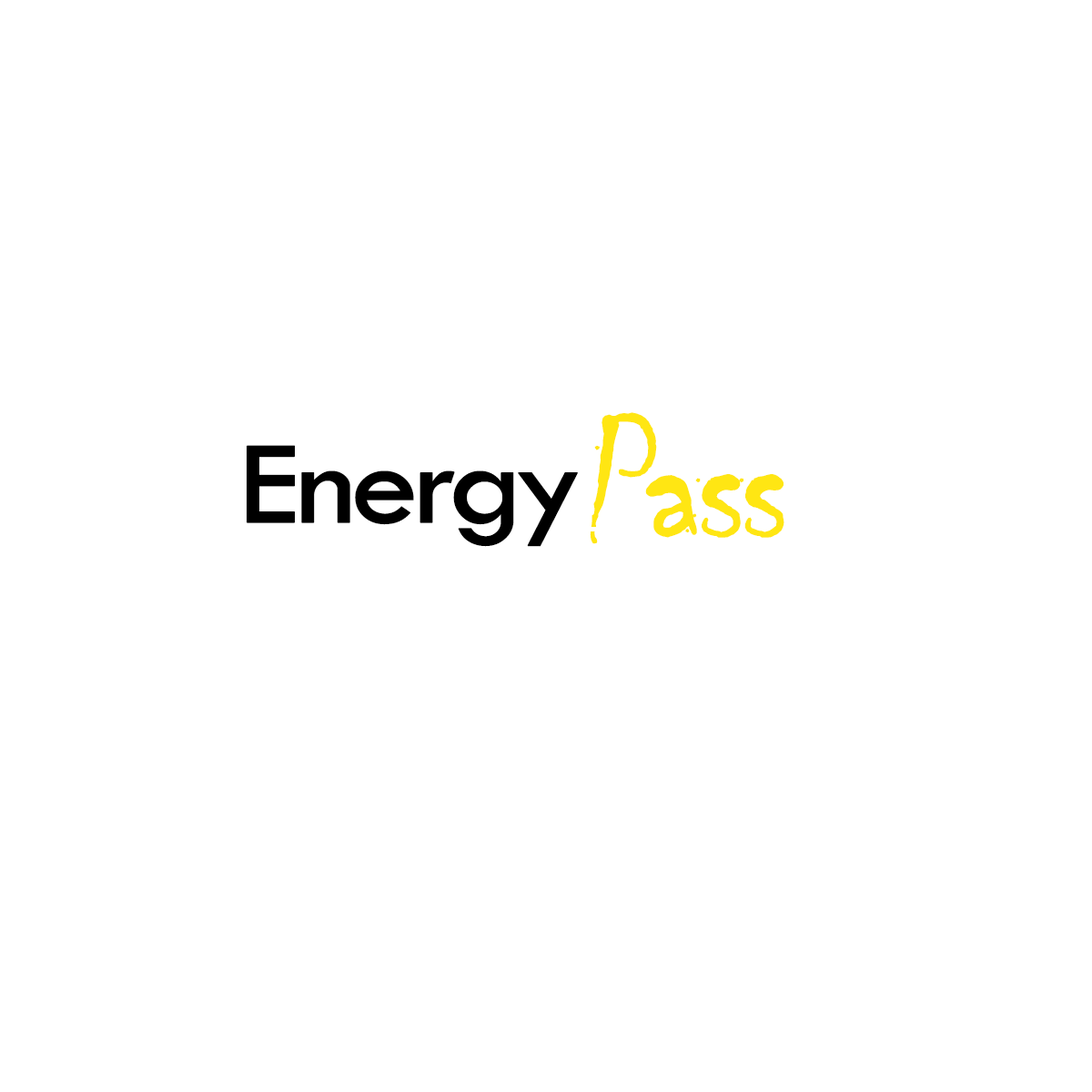
<style>
.page{position:relative;width:1092px;height:1092px;background:#ffffff}
.page>*{position:absolute;margin:0}
.t1{font:182px "Chiller-Regular";letter-spacing:0.005em;color:#ffe613;font-weight:bold}
.t2{font:122.8px "TwCenMT-Regular";letter-spacing:0.005em;color:#000000;font-weight:bold;scale:1.11 1}
</style>
<div class="page">
<p class="t1" style="left:590px;top:412px;width:194px;height:132px">Pass</p>
<p class="t2" style="left:247px;top:445px;width:331px;height:102px">Energy</p>
</div>
